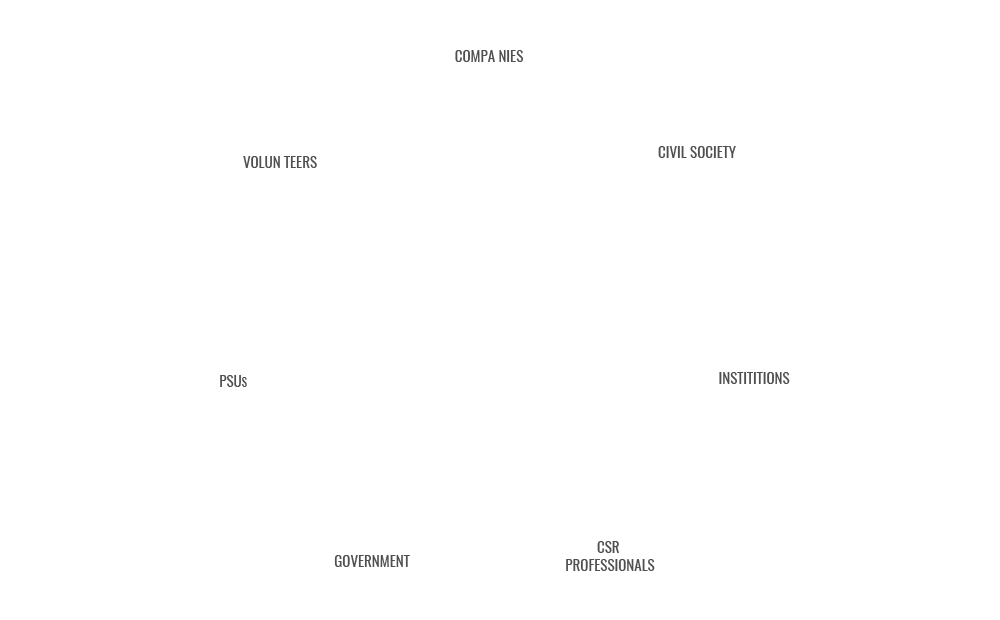
<style>
.page{position:relative;width:1000px;height:620px;background:#ffffff}
.page>*{position:absolute;margin:0}
.t1{font:15px "Oswald-Regular";color:#4f4f4f;text-transform:uppercase}
.t2{font:15px "Oswald-Regular";color:#4f4f4f;font-variant:small-caps}
</style>
<div class="page">
<p class="t1" style="left:455px;top:50px;width:68px;height:12px">Compa Nies</p>
<p class="t1" style="left:658px;top:146px;width:78px;height:12px">Civil Society</p>
<p class="t1" style="left:243px;top:156px;width:74px;height:12px">Volun Teers</p>
<p class="t1" style="left:220px;top:375px;width:27px;height:12px">Psu<span class="t2">s</span></p>
<p class="t1" style="left:719px;top:372px;width:71px;height:12px">Instititions</p>
<p class="t1" style="left:566px;top:541px;width:89px;height:30px;text-align:center">CSR <br>Professionals</p>
<p class="t1" style="left:334px;top:555px;width:76px;height:12px">Government</p>
</div>
